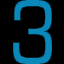
<style>
.page{position:relative;width:64px;height:64px;background:#000000}
.page>*{position:absolute;margin:0}
.t1{font:88px "MKSansTallX";color:#0a88ba}
</style>
<div class="page">
<p class="t1" style="left:13px;top:0px;width:39px;height:64px">3</p>
</div>
